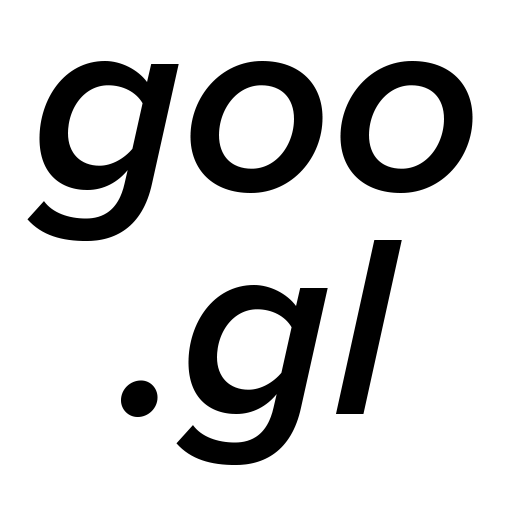
<style>
.page{position:relative;width:512px;height:512px;background:#ffffff}
.page>*{position:absolute;margin:0}
.t1{font:261px/224px "ProximaNova-SemiboldIt";color:#000000}
</style>
<div class="page">
<p class="t1" style="left:27px;top:61px;width:446px;height:405px;text-align:center">goo<br>.gl</p>
</div>
